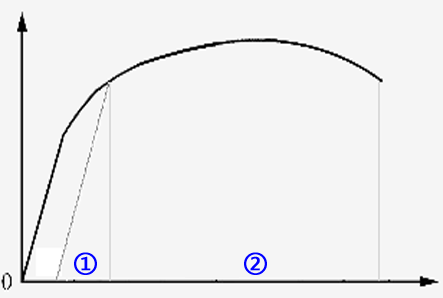
<style>
.page{position:relative;width:443px;height:298px;background:#f5f5f5}
.page>*{position:absolute;margin:0}
.t1{font:24px "MicrosoftYaHei";letter-spacing:0.075em;color:#0000ff;font-weight:bold}
</style>
<div class="page">
<p class="t1" style="left:74px;top:252px;width:23px;height:23px">①</p>
<p class="t1" style="left:244px;top:252px;width:23px;height:23px">②</p>
</div>
